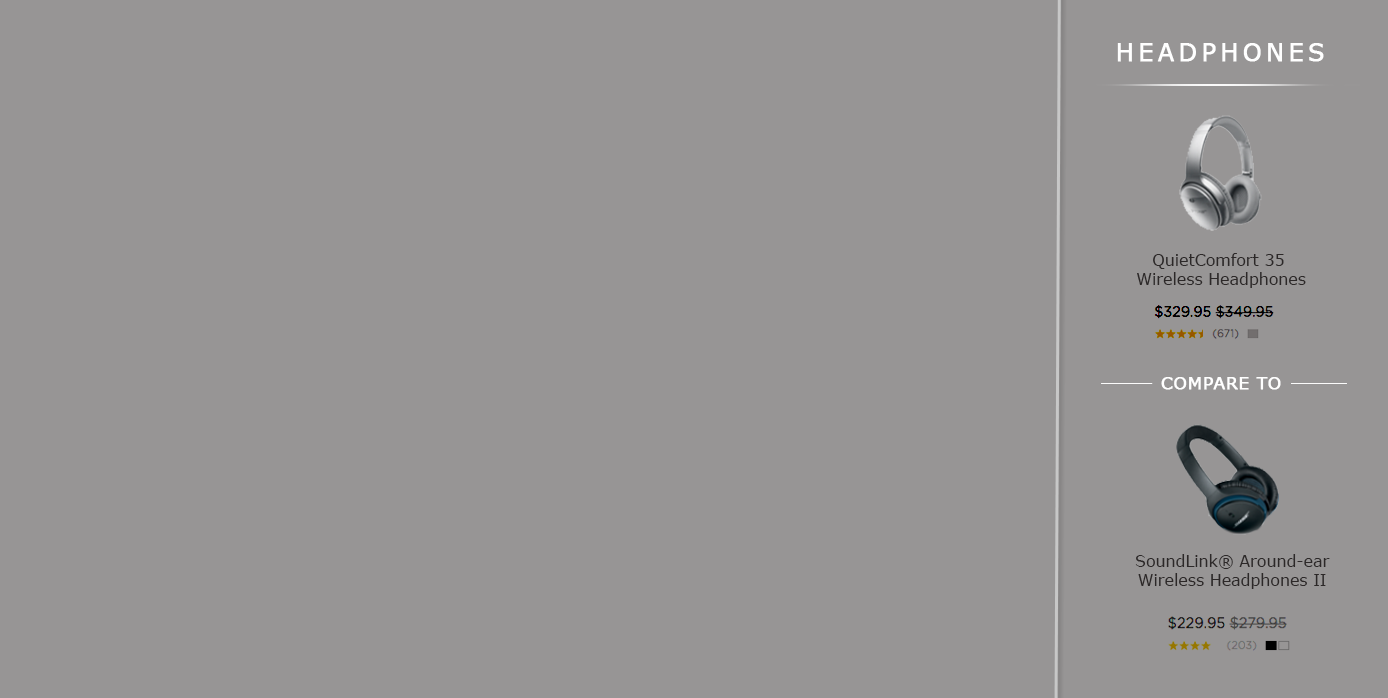
<style>
.page{position:relative;width:1388px;height:698px;background:#979595}
.page>*{position:absolute;margin:0}
.t1{font:23.9px "Verdana";letter-spacing:0.16em;color:#ffffff;text-transform:uppercase;font-weight:bold}
.t2{font:15.7px "Verdana";color:#2c2828}
.t3{font:17.2px "Verdana";letter-spacing:0.02em;color:#ffffff;text-transform:uppercase;font-weight:bold}
</style>
<div class="page">
<p class="t1" style="left:1117px;top:43px;width:207px;height:19px">HEADPHONES</p>
<p class="t2" style="left:1137px;top:253px;width:169px;height:35px;text-align:center">QuietComfort 35 <br>Wireless Headphones</p>
<p class="t3" style="left:1161px;top:377px;width:120px;height:13px">Compare To</p>
<p class="t2" style="left:1135px;top:554px;width:195px;height:35px;text-align:center">SoundLink® Around-ear<br>Wireless Headphones II</p>
</div>
